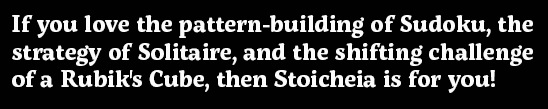
<style>
.page{position:relative;width:548px;height:109px;background:#010101}
.page>*{position:absolute;margin:0}
.t1{font:23.1px "ServusSlab-Bold";color:#fbfbfb}
</style>
<div class="page">
<p class="t1" style="left:12px;top:15px;width:521px;height:78px">If you love the pattern-building of Sudoku, the<br>strategy of Solitaire, and the shifting challenge <br>of a Rubik's Cube, then Stoicheia is for you!</p>
</div>
